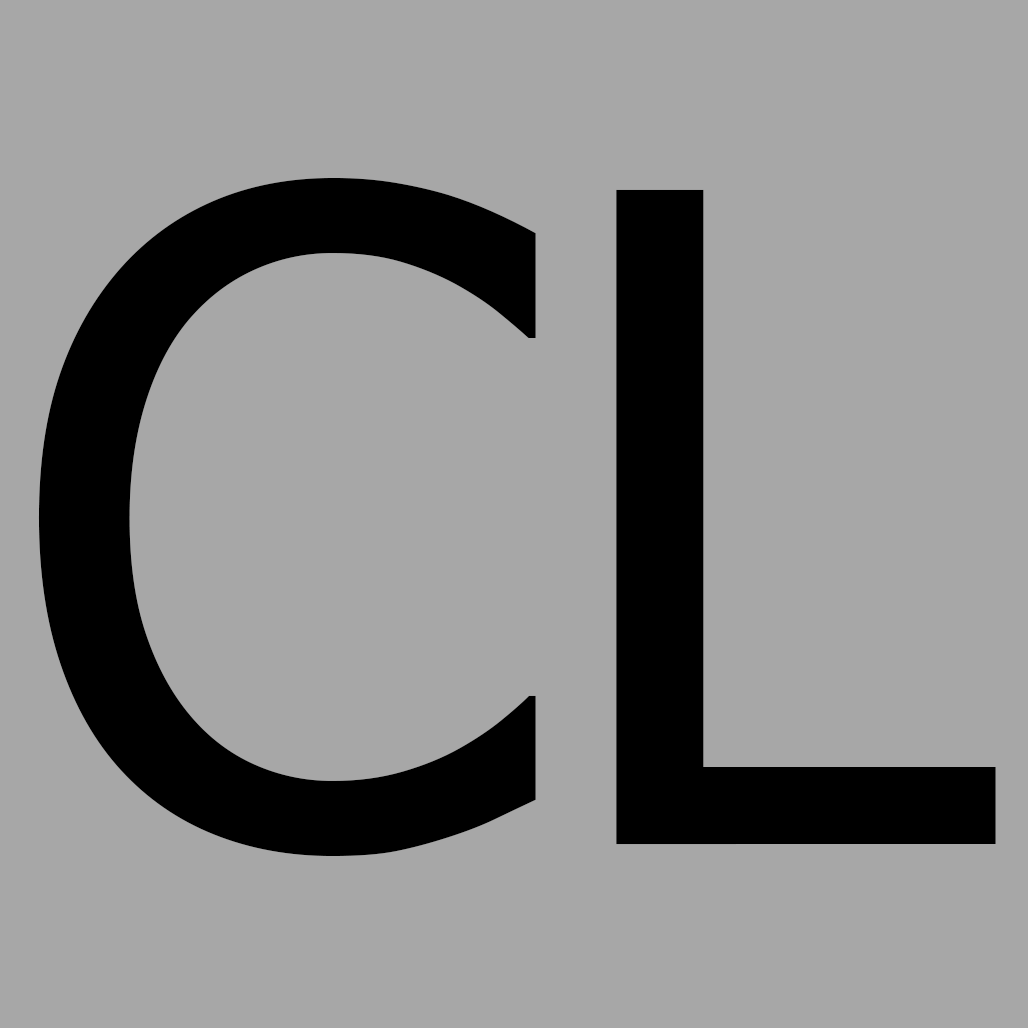
<style>
.page{position:relative;width:1028px;height:1028px;background:#a7a7a7}
.page>*{position:absolute;margin:0}
.t1{font:900px "Tahoma";color:#000000}
</style>
<div class="page">
<p class="t1" style="left:38px;top:177px;width:958px;height:679px">CL</p>
</div>
